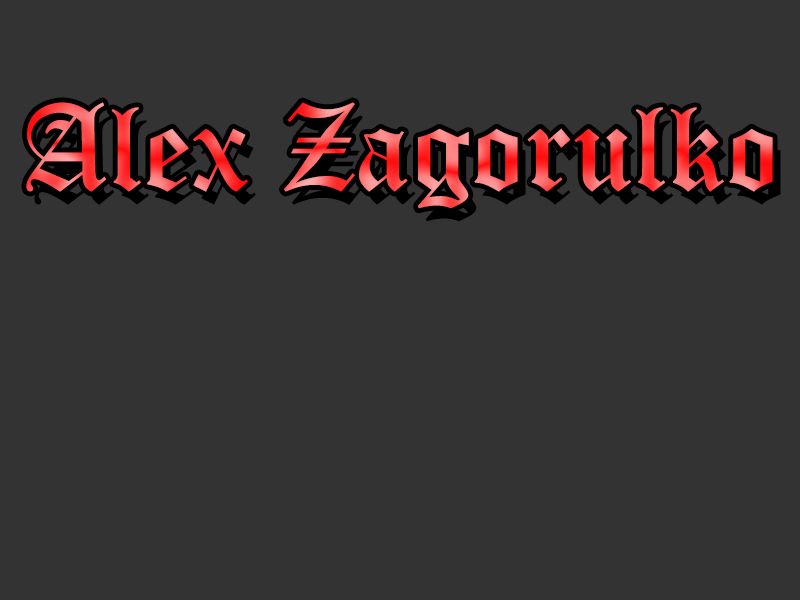
<style>
.page{position:relative;width:800px;height:600px;background:#333333}
.page>*{position:absolute;margin:0}
.t1{font:120px "OldEnglishTextMT"}
</style>
<div class="page">
<p class="t1" style="left:26px;top:102px;width:747px;height:107px">Alex Zagorulko</p>
</div>
